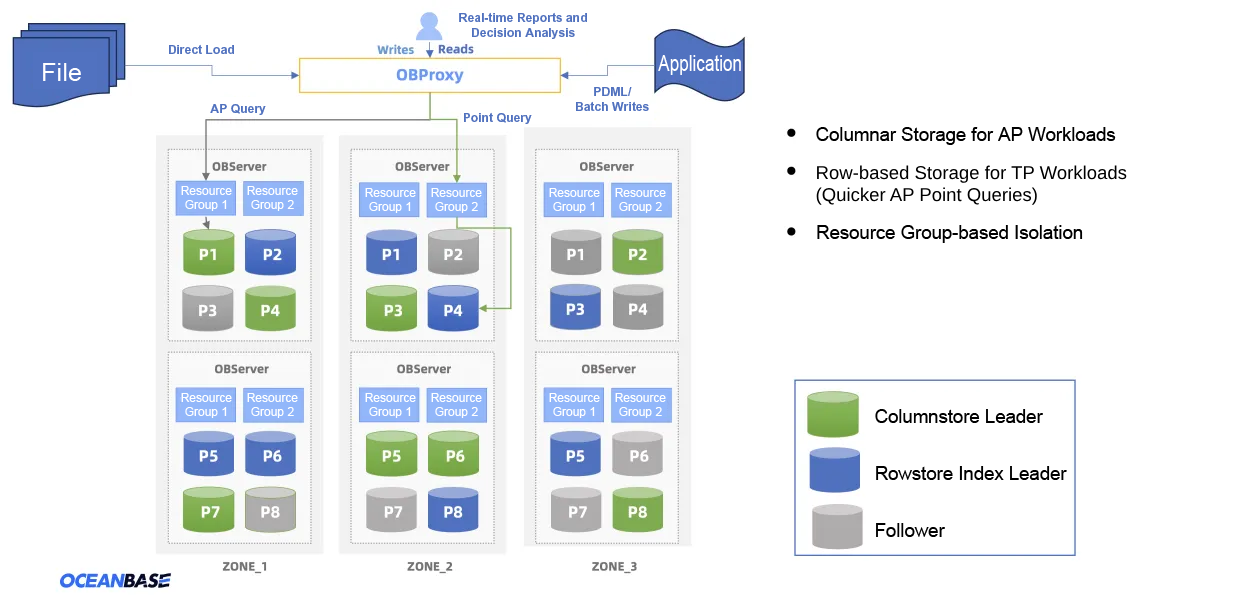
<style>
.page{position:relative;width:1242px;height:595px;background:#ffffff}
.page>*{position:absolute;margin:0}
.t1{font:12.2px/14.5px "Arial-BoldMT";color:#5071be}
.t2{font:12.2px "Arial-BoldMT";color:#5071be}
.t3{font:25.4px "ArialMT";color:#ffffff}
.t4{font:21.7px "ArialMT";color:#ffffff;scale:0.79 1}
.t5{font:18.6px "ArialMT";color:#000000}
.t6{font:18.6px/22px "ArialMT";color:#000000}
.t7{font:12px/13.9px "ArialMT";color:#ffffff}
</style>
<div class="page">
<p class="t1" style="left:459px;top:12px;width:128px;height:27px;text-align:center">Real-time Reports and<br>Decision Analysis</p>
<p class="t2" style="left:169px;top:44px;width:65px;height:10px">Direct Load</p>
<p class="t3" style="left:43px;top:63px;width:38px;height:18px">File</p>
<p class="t4" style="left:658px;top:55px;width:83px;height:20px">Application</p>
<p class="t1" style="left:576px;top:87px;width:73px;height:24px;text-align:center">PDML/<br>Batch Writes</p>
<p class="t2" style="left:210px;top:104px;width:56px;height:11px">AP Query</p>
<p class="t2" style="left:464px;top:112px;width:68px;height:12px">Point Query</p>
<p class="t5" style="left:816px;top:127px;width:300px;height:18px">Columnar Storage for AP Workloads</p>
<p class="t6" style="left:816px;top:165px;width:311px;height:40px">Row-based Storage for TP Workloads<br>(Quicker AP Point Queries)</p>
<p class="t7" style="left:181px;top:186px;width:51px;height:25px;text-align:center">Resource<br>Group 1</p>
<p class="t7" style="left:247px;top:186px;width:51px;height:25px;text-align:center">Resource<br>Group 2</p>
<p class="t7" style="left:365px;top:188px;width:51px;height:25px;text-align:center">Resource<br>Group 1</p>
<p class="t7" style="left:431px;top:188px;width:51px;height:25px;text-align:center">Resource<br>Group 2</p>
<p class="t7" style="left:549px;top:188px;width:51px;height:25px;text-align:center">Resource<br>Group 1</p>
<p class="t7" style="left:615px;top:188px;width:51px;height:25px;text-align:center">Resource<br>Group 2</p>
<p class="t5" style="left:817px;top:225px;width:266px;height:18px">Resource Group-based Isolation</p>
<p class="t7" style="left:181px;top:393px;width:51px;height:25px;text-align:center">Resource<br>Group 1</p>
<p class="t7" style="left:247px;top:393px;width:51px;height:25px;text-align:center">Resource<br>Group 2</p>
<p class="t7" style="left:365px;top:393px;width:51px;height:25px;text-align:center">Resource<br>Group 1</p>
<p class="t7" style="left:431px;top:393px;width:51px;height:25px;text-align:center">Resource<br>Group 2</p>
<p class="t7" style="left:549px;top:393px;width:51px;height:25px;text-align:center">Resource<br>Group 1</p>
<p class="t7" style="left:615px;top:393px;width:51px;height:25px;text-align:center">Resource<br>Group 2</p>
<p class="t5" style="left:875px;top:409px;width:168px;height:14px">Columnstore Leader</p>
<p class="t5" style="left:876px;top:466px;width:191px;height:14px">Rowstore Index Leader</p>
<p class="t5" style="left:876px;top:523px;width:69px;height:14px">Follower</p>
</div>
